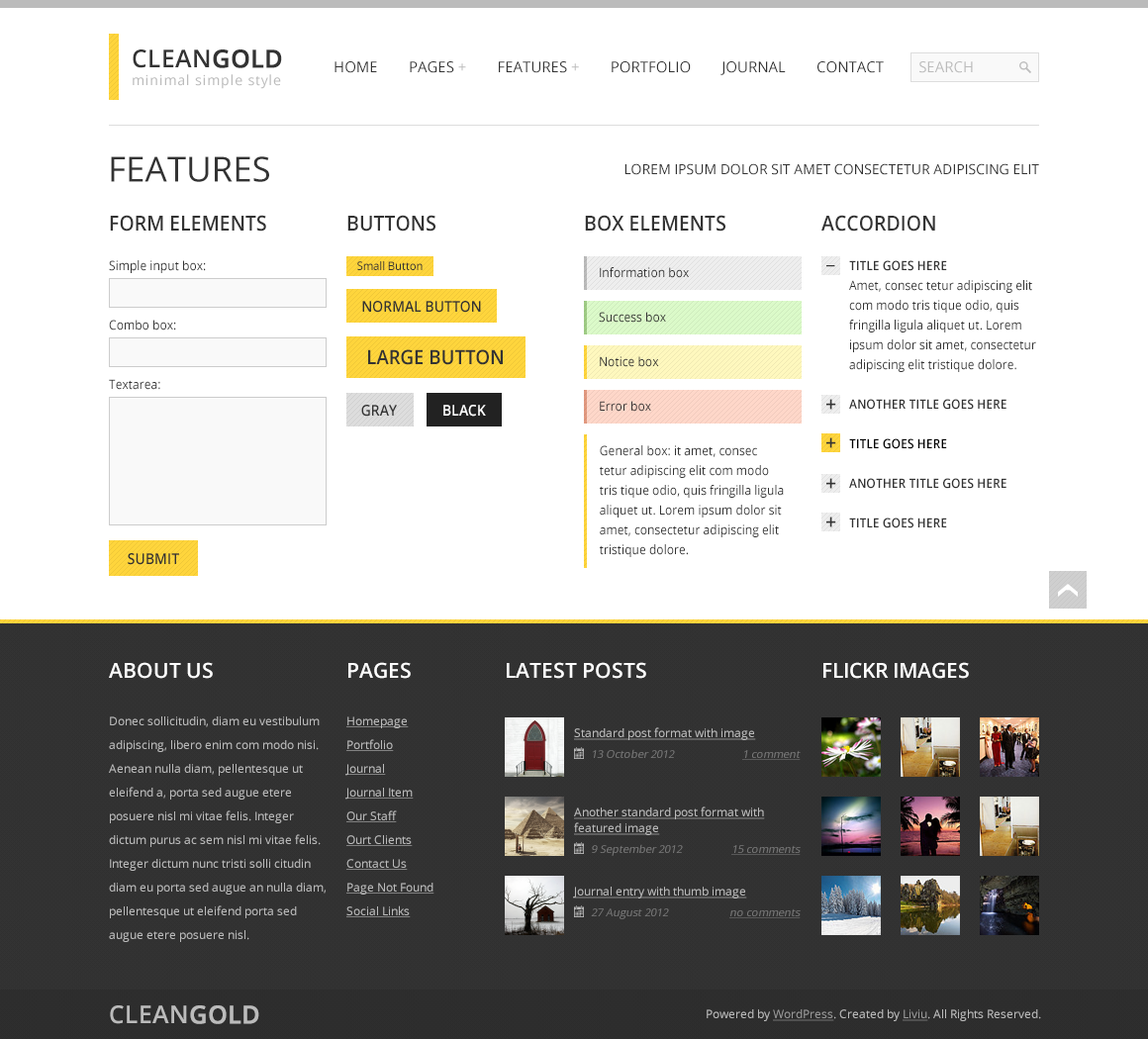
<style>
.page{position:relative;width:1148px;height:1039px;background:#ffffff}
.page>*{position:absolute;margin:0}
.t1{font:13.9px/17.8px "OpenSans";letter-spacing:0.045em;color:#bbbbbb}
.t2{font:24.7px/17.8px "OpenSans-Semibold";color:#333333;text-transform:uppercase}
.t3{font:24.7px/17.8px "OpenSans-Semibold";color:#333333;text-transform:uppercase;font-weight:bold}
.t4{font:14.8px "OpenSans";color:#333333;text-transform:uppercase}
.t5{font:14.8px "OpenSans";color:#bbbbbb;text-transform:uppercase}
.t6{font:34.6px "OpenSans";color:#333333;text-transform:uppercase}
.t7{font:13.9px "OpenSans";color:#333333;text-transform:uppercase}
.t8{font:12.9px/19.8px "OpenSans";color:#333333;scale:0.93 1}
.t9{font:20.8px/19.8px "OpenSans-Semibold";color:#333333;text-transform:uppercase;scale:0.93 1}
.t10{font:20.8px "OpenSans-Semibold";color:#333333;text-transform:uppercase;scale:0.93 1}
.t11{font:12.9px/19.8px "OpenSans-Semibold";color:#333333;text-transform:uppercase;scale:0.93 1}
.t12{font:12.9px/19.8px "OpenSans-Semibold";color:#000000;text-transform:uppercase;scale:0.93 1}
.t13{font:11.9px "OpenSans";color:#333333;scale:0.93 1}
.t14{font:12.9px "OpenSans";color:#333333;scale:0.93 1}
.t15{font:14.8px "OpenSans-Semibold";color:#333333;text-transform:uppercase;scale:0.93 1}
.t16{font:19.8px "OpenSans-Semibold";color:#333333;text-transform:uppercase;scale:0.93 1}
.t17{font:14.8px "OpenSans-Semibold";color:#ffffff;text-transform:uppercase;scale:0.93 1}
.t18{font:11.9px/23.7px "OpenSans";color:#bbbbbb}
.t19{font:20.8px/23.7px "OpenSans-Semibold";color:#fefefe;text-transform:uppercase}
.t20{font:11.9px/23.7px "OpenSans";color:#bbbbbb;text-decoration:underline}
.t21{font:20.8px "OpenSans-Semibold";color:#fefefe;text-transform:uppercase}
.t22{font:11.9px "OpenSans";color:#bbbbbb;text-decoration:underline}
.t23{font:10.9px "OpenSans";color:#777777;font-style:italic}
.t24{font:10.9px "OpenSans";color:#777777;font-style:italic;text-decoration:underline}
.t25{font:11.9px/15.8px "OpenSans";color:#bbbbbb;text-decoration:underline}
.t26{font:24.7px "OpenSans-Semibold";color:#bbbbbb;text-transform:uppercase}
.t27{font:24.7px "OpenSans-Semibold";color:#bbbbbb;text-transform:uppercase;font-weight:bold}
.t28{font:11.9px "OpenSans";color:#bbbbbb}
.t29{font:11.9px "OpenSans";color:#999999;text-decoration:underline}
</style>
<div class="page">
<p class="t1" style="left:133px;top:49px;width:149px;height:40px"><span class="t2">Clean</span><span class="t3">Gold<br></span>minimal simple style</p>
<p class="t4" style="left:334px;top:61px;width:550px;height:14px">Home        Pages <span class="t5">+</span>        Features <span class="t5">+</span>        Portfolio        JOURNAL        Contact</p>
<p class="t5" style="left:919px;top:61px;width:54px;height:12px">Search</p>
<p class="t6" style="left:111px;top:156px;width:158px;height:26px">Features</p>
<p class="t7" style="left:624px;top:163px;width:415px;height:12px">Lorem ipsum dolor sit amet consectetur adipiscing elit</p>
<p class="t8" style="left:109px;top:215px;width:157px;height:175px;text-align:justify"><span class="t9">Form elements<br><br></span>Simple input box:<br><br><br>Combo box:<br><br><br>Textarea:</p>
<p class="t10" style="left:347px;top:215px;width:88px;height:17px">Buttons</p>
<p class="t10" style="left:585px;top:215px;width:140px;height:17px">Box Elements</p>
<p class="t8" style="left:821px;top:215px;width:215px;height:313px;text-align:justify"><span class="t9">Accordion<br><br></span><span class="t11">Title goes here<br></span>Amet, consec tetur adipiscing elit com modo tris tique odio, quis fringilla ligula aliquet ut. Lorem ipsum dolor sit amet, consectetur adipiscing elit tristique dolore.<br><br><span class="t11">Another Title goes here<br><br></span><span class="t12">Title goes here<br><br></span><span class="t11">Another Title goes here<br><br>Title goes here</span></p>
<p class="t13" style="left:357px;top:261px;width:65px;height:9px">Small Button</p>
<p class="t14" style="left:600px;top:267px;width:89px;height:11px">Information box</p>
<p class="t10" style="left:826px;top:265px;width:9px;height:2px">_</p>
<p class="t15" style="left:362px;top:301px;width:119px;height:12px">Normal Button</p>
<p class="t14" style="left:599px;top:312px;width:67px;height:11px">Success box</p>
<p class="t16" style="left:368px;top:349px;width:135px;height:16px">Large Button</p>
<p class="t14" style="left:600px;top:356px;width:59px;height:11px">Notice box</p>
<p class="t14" style="left:600px;top:401px;width:51px;height:11px">Error box</p>
<p class="t10" style="left:826px;top:399px;width:10px;height:11px">+</p>
<p class="t15" style="left:361px;top:405px;width:36px;height:12px">Gray</p>
<p class="t17" style="left:443px;top:405px;width:43px;height:12px">Black</p>
<p class="t10" style="left:826px;top:437px;width:10px;height:11px">+</p>
<p class="t8" style="left:600px;top:445px;width:184px;height:112px">General box: it amet, consec tetur adipiscing elit com modo tris tique odio, quis fringilla ligula aliquet ut. Lorem ipsum dolor sit amet, consectetur adipiscing elit tristique dolore.</p>
<p class="t10" style="left:826px;top:478px;width:10px;height:11px">+</p>
<p class="t10" style="left:826px;top:516px;width:10px;height:11px">+</p>
<p class="t15" style="left:128px;top:553px;width:51px;height:12px">Submit</p>
<p class="t18" style="left:109px;top:662px;width:217px;height:280px"><span class="t19">About US<br><br></span>Donec sollicitudin, diam eu vestibulum adipiscing, libero enim com modo nisi. Aenean nulla diam, pellentesque ut eleifend a, porta sed augue etere posuere nisl mi vitae felis. Integer dictum purus ac sem nisl mi vitae felis. Integer dictum nunc tristi solli citudin diam eu porta sed augue an nulla diam, pellentesque ut eleifend porta sed augue etere posuere nisl.</p>
<p class="t20" style="left:345px;top:662px;width:89px;height:255px"><span class="t19">Pages<br><br></span>Homepage<br>Portfolio<br>Journal<br>Journal Item<br>Our Staff<br>Ourt Clients<br>Contact Us<br>Page Not Found<br>Social Links</p>
<p class="t21" style="left:507px;top:662px;width:139px;height:17px">Latest Posts</p>
<p class="t21" style="left:823px;top:662px;width:146px;height:17px">Flickr Images</p>
<p class="t22" style="left:574px;top:727px;width:182px;height:13px">Standard post format with image</p>
<p class="t23" style="left:593px;top:749px;width:82px;height:9px">13 October 2012</p>
<p class="t24" style="left:742px;top:750px;width:58px;height:10px">1 comment</p>
<p class="t25" style="left:574px;top:806px;width:191px;height:29px">Another standard post format with featured image</p>
<p class="t23" style="left:592px;top:844px;width:91px;height:12px">9 September 2012</p>
<p class="t24" style="left:731px;top:845px;width:69px;height:10px">15 comments</p>
<p class="t22" style="left:573px;top:887px;width:174px;height:11px">Journal entry with thumb image</p>
<p class="t23" style="left:591px;top:908px;width:78px;height:11px">27 August 2012</p>
<p class="t24" style="left:729px;top:908px;width:71px;height:10px">no comments</p>
<p class="t26" style="left:110px;top:1005px;width:149px;height:19px">Clean<span class="t27">Gold</span></p>
<p class="t28" style="left:706px;top:1009px;width:335px;height:12px">Powered by <span class="t29">WordPress</span>. Created by <span class="t29">Liviu</span>. All Rights Reserved.</p>
</div>
